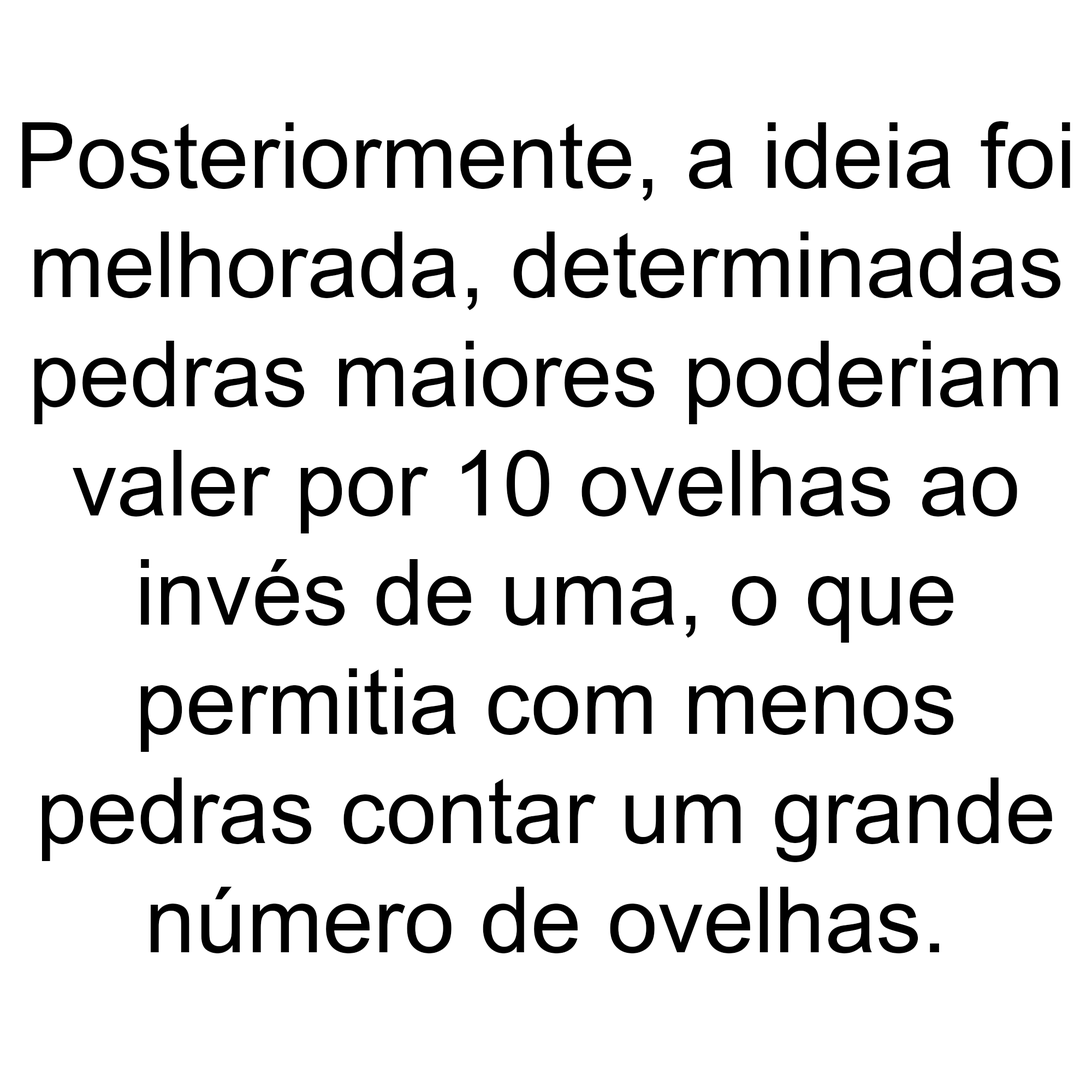
<style>
.page{position:relative;width:1092px;height:1092px;background:#ffffff}
.page>*{position:absolute;margin:0}
.t1{font:91px "ArialMT";color:#000000}
</style>
<div class="page">
<p class="t1" style="left:22px;top:121px;width:1048px;height:832px;text-align:center">Posteriormente, a ideia foi<br>melhorada, determinadas<br>pedras maiores poderiam<br>valer por 10 ovelhas ao<br>invés de uma, o que<br>permitia com menos<br>pedras contar um grande<br>número de ovelhas.</p>
</div>
